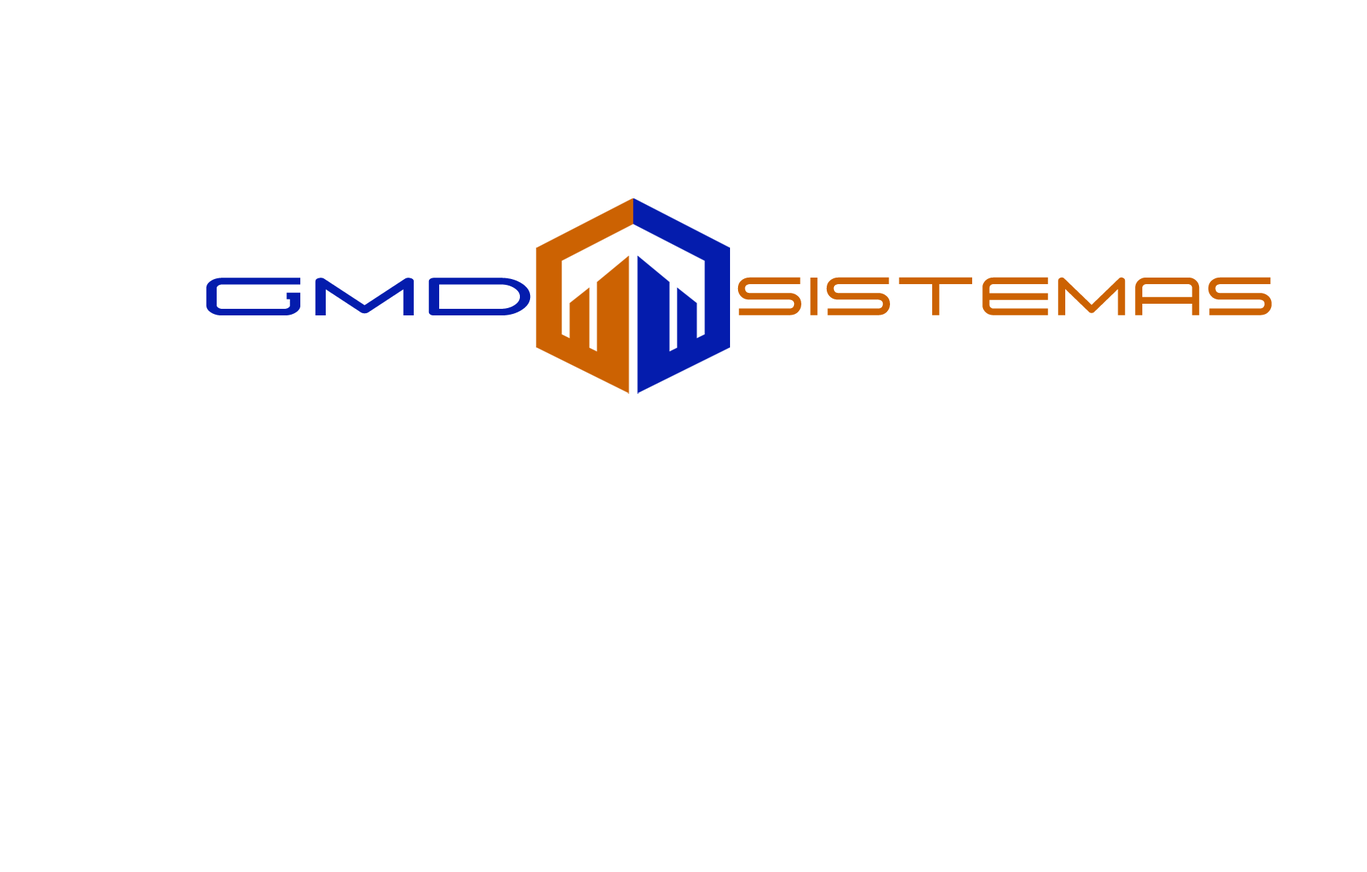
<style>
.page{position:relative;width:1367px;height:872px;background:#ffffff}
.page>*{position:absolute;margin:0}
.t1{font:68.9px "Suissnord";letter-spacing:0.069em;color:#041cad;scale:1.57 1}
.t2{font:68.9px "Suissnord";letter-spacing:0.069em;color:#cc6202;scale:1.06 1}
</style>
<div class="page">
<p class="t1" style="left:206px;top:278px;width:325px;height:38px">GMD</p>
<p class="t2" style="left:737px;top:277px;width:535px;height:39px">SISTEMAS</p>
</div>
